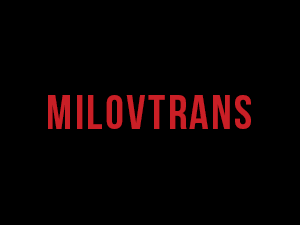
<style>
.page{position:relative;width:300px;height:225px;background:#000000}
.page>*{position:absolute;margin:0}
.t1{font:48px "BebasNeue";letter-spacing:0.05em;color:#ca1f26;text-transform:uppercase}
</style>
<div class="page">
<p class="t1" style="left:48px;top:95px;width:203px;height:34px">milovtrans</p>
</div>
